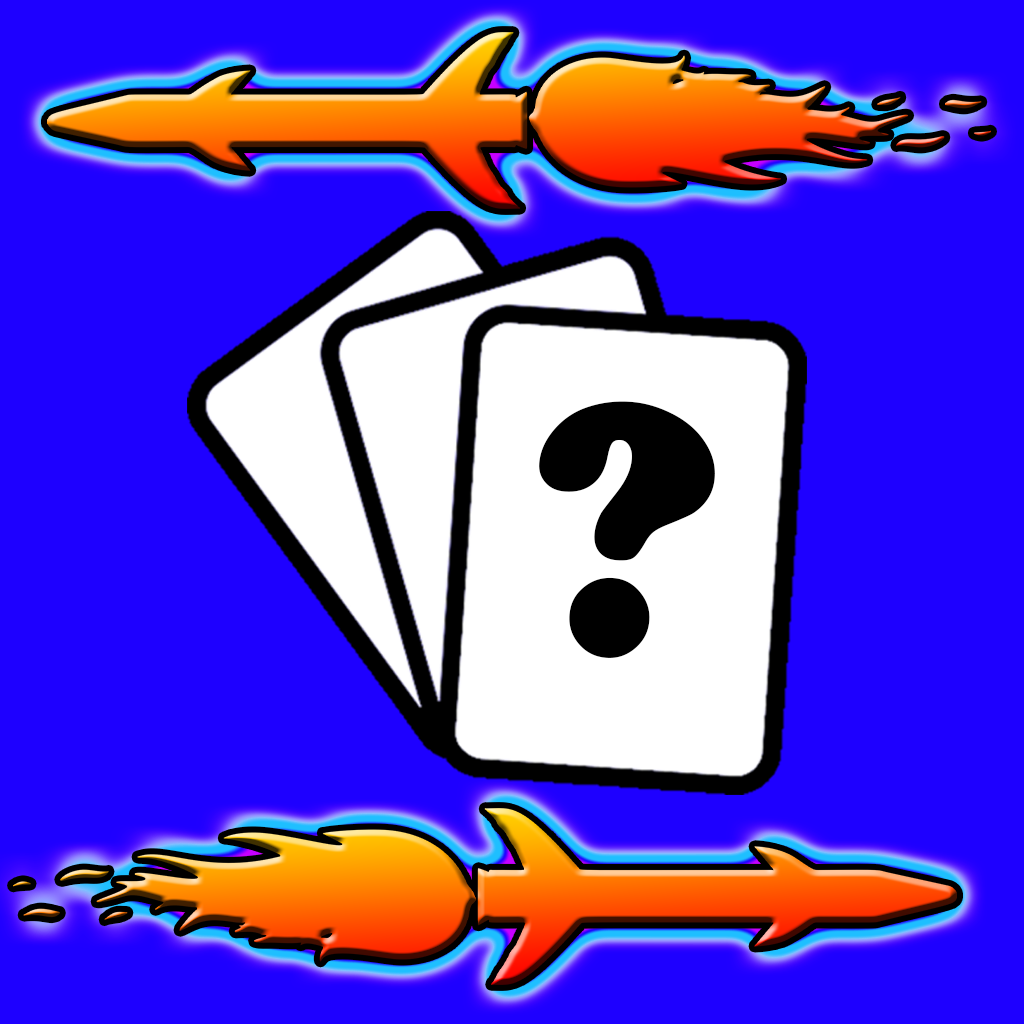
<style>
.page{position:relative;width:1024px;height:1024px;background:#1e00ff}
.page>*{position:absolute;margin:0}
.t1{font:378.6px "CooperBlack";letter-spacing:0.2em;color:#000000}
</style>
<div class="page">
<p class="t1" style="left:539px;top:401px;width:176px;height:257px;rotate:5deg">?</p>
</div>
